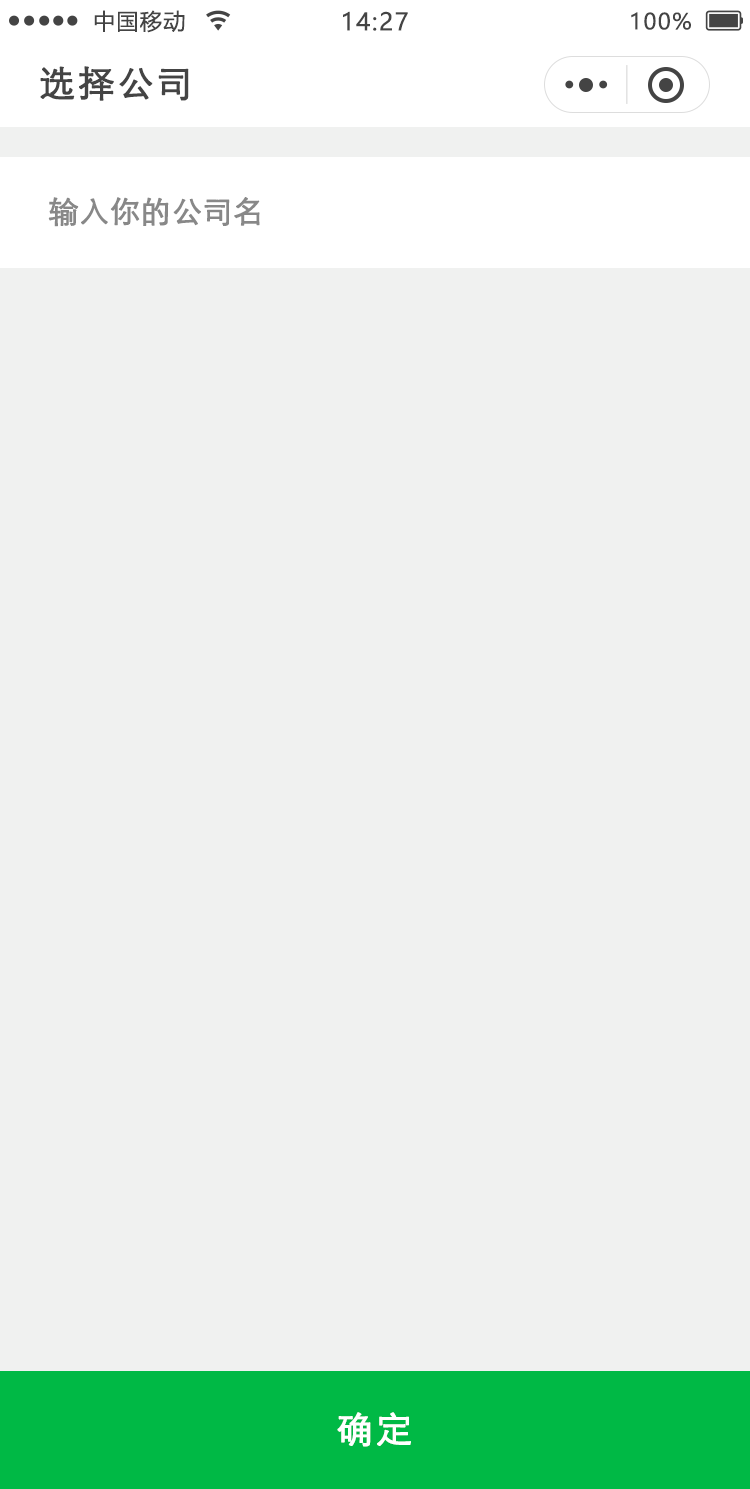
<style>
.page{position:relative;width:750px;height:1489px;background:#f0f1f0}
.page>*{position:absolute;margin:0}
.t1{font:22px "MicrosoftYaHei";letter-spacing:0.06em;color:#444444}
.t2{font:24px "MicrosoftYaHei";letter-spacing:0.06em;color:#444444}
.t3{font:36px "STXihei";letter-spacing:0.06em;color:#444444;font-weight:bold}
.t4{font:30px "STXihei";color:#888888;font-weight:bold}
.t5{font:36px "STXihei";letter-spacing:0.06em;color:#ffffff;font-weight:bold}
</style>
<div class="page">
<p class="t1" style="left:94px;top:10px;width:91px;height:23px">中国移动</p>
<p class="t2" style="left:343px;top:11px;width:65px;height:20px">14:27</p>
<p class="t1" style="left:631px;top:12px;width:60px;height:18px">100%</p>
<p class="t3" style="left:40px;top:66px;width:149px;height:35px">选择公司</p>
<p class="t4" style="left:48px;top:197px;width:212px;height:30px">输入你的公司名</p>
<p class="t5" style="left:337px;top:1412px;width:74px;height:35px">确定</p>
</div>
